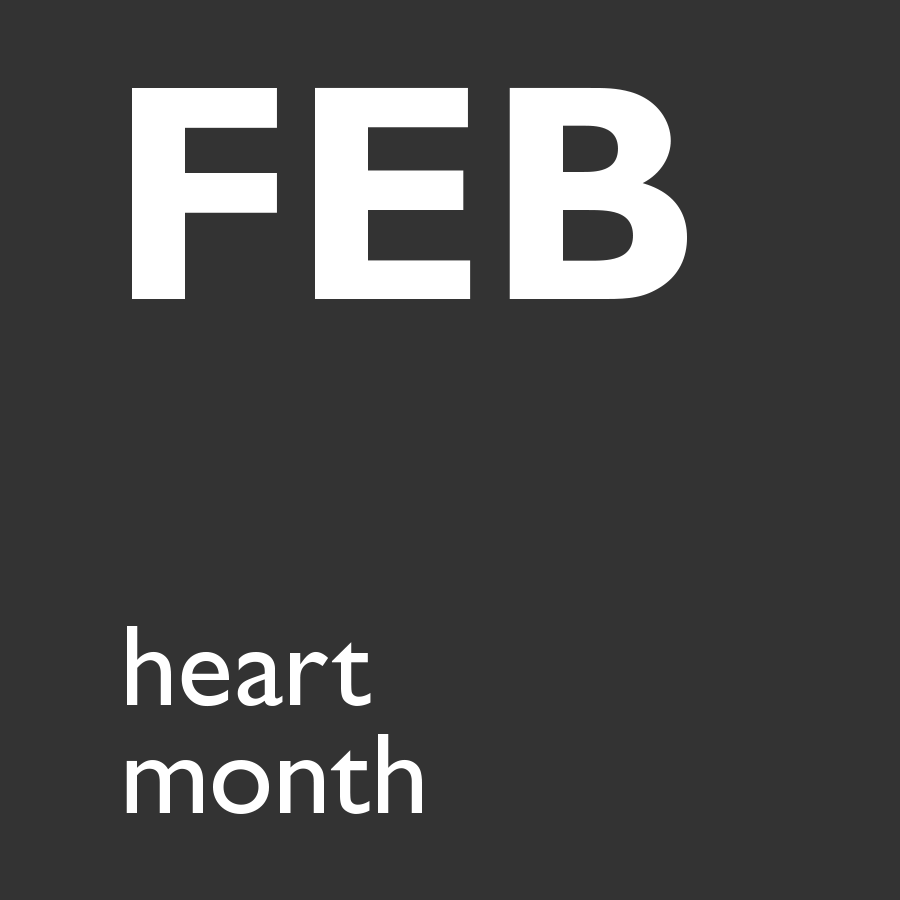
<style>
.page{position:relative;width:900px;height:900px;background:#333333}
.page>*{position:absolute;margin:0}
.t1{font:308.7px "GillSansMTPro-Bold";color:#ffffff}
.t2{font:116.4px/108.3px "GillSansMTPro-Medium";color:#ffffff}
</style>
<div class="page">
<p class="t1" style="left:132px;top:87px;width:555px;height:212px">FEB</p>
<p class="t2" style="left:126px;top:626px;width:296px;height:188px">heart<br>month</p>
</div>
